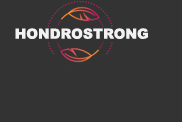
<style>
.page{position:relative;width:182px;height:122px;background:#333333}
.page>*{position:absolute;margin:0}
.t1{font:14px "Arial-Black";color:#f2f2f2}
</style>
<div class="page">
<p class="t1" style="left:15px;top:28px;width:133px;height:11px">HONDROSTRONG</p>
</div>
